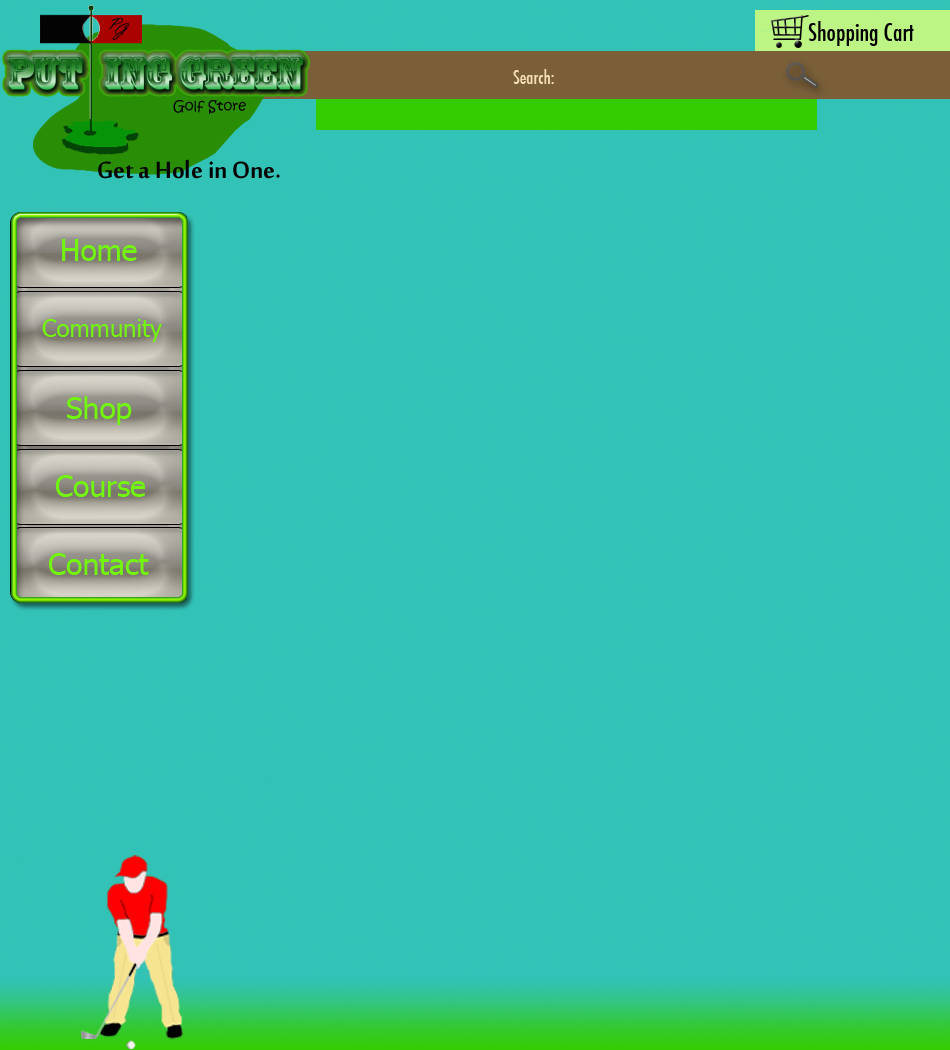
<style>
.page{position:relative;width:950px;height:1050px;background:#32c2b6}
.page>*{position:absolute;margin:0}
.t1{font:18px "Futura-CondensedMedium";color:#f5dbb8}
.t2{font:14px "KristenITC-Regular";color:#030303}
.t3{font:36px "MoolBoran";color:#030303}
.t4{font:30px "Tahoma";color:#72f610}
.t5{font:24px "Tahoma";color:#72f610}
</style>
<div class="page">
<p class="t1" style="left:513px;top:69px;width:41px;height:15px">Search:</p>
<p class="t2" style="left:173px;top:100px;width:73px;height:14px">Golf Store</p>
<p class="t3" style="left:98px;top:159px;width:182px;height:20px">Get a Hole in One.</p>
<p class="t4" style="left:62px;top:239px;width:75px;height:22px">Home</p>
<p class="t5" style="left:42px;top:319px;width:120px;height:23px">Community</p>
<p class="t4" style="left:67px;top:396px;width:65px;height:29px">Shop</p>
<p class="t4" style="left:56px;top:475px;width:89px;height:22px">Course</p>
<p class="t4" style="left:49px;top:553px;width:100px;height:22px">Contact</p>
</div>
